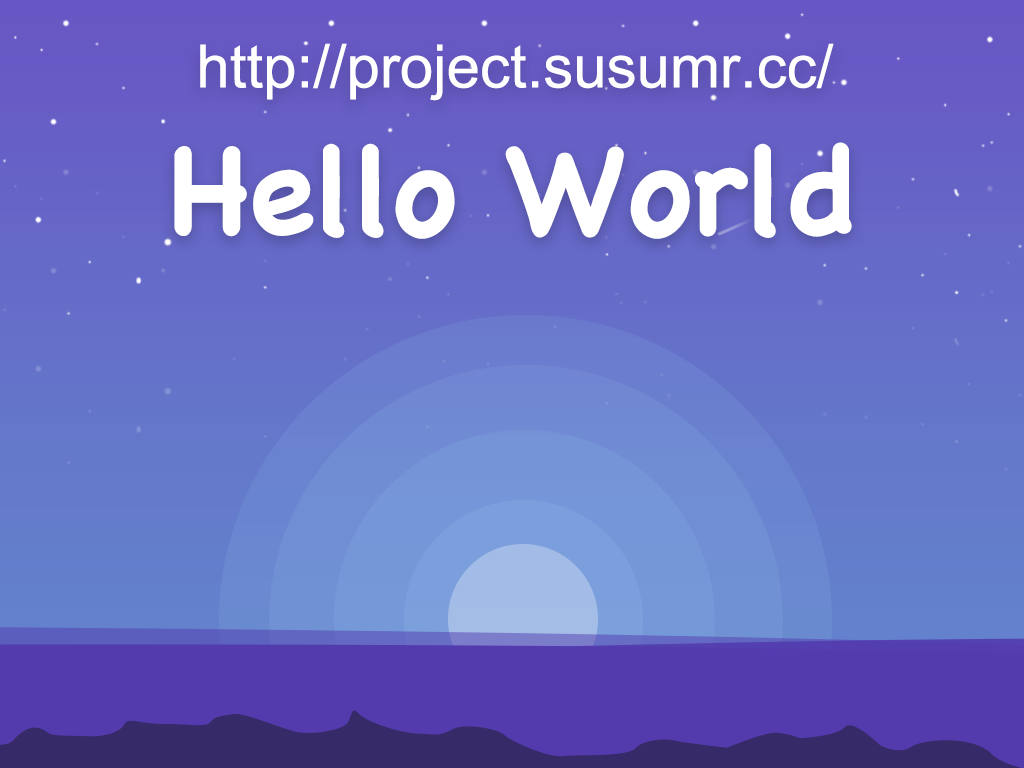
<style>
.page{position:relative;width:1024px;height:768px}
.page>*{position:absolute;margin:0}
.t1{font:60px "ArialMT";color:#ffffff}
.t2{font:121.6px "Chalkboard-Bold";color:#ffffff}
</style>
<div class="page">
<p class="t1" style="left:200px;top:43px;width:634px;height:58px">http://project.susumr.cc/</p>
<p class="t2" style="left:174px;top:142px;width:678px;height:97px">Hello World</p>
</div>
